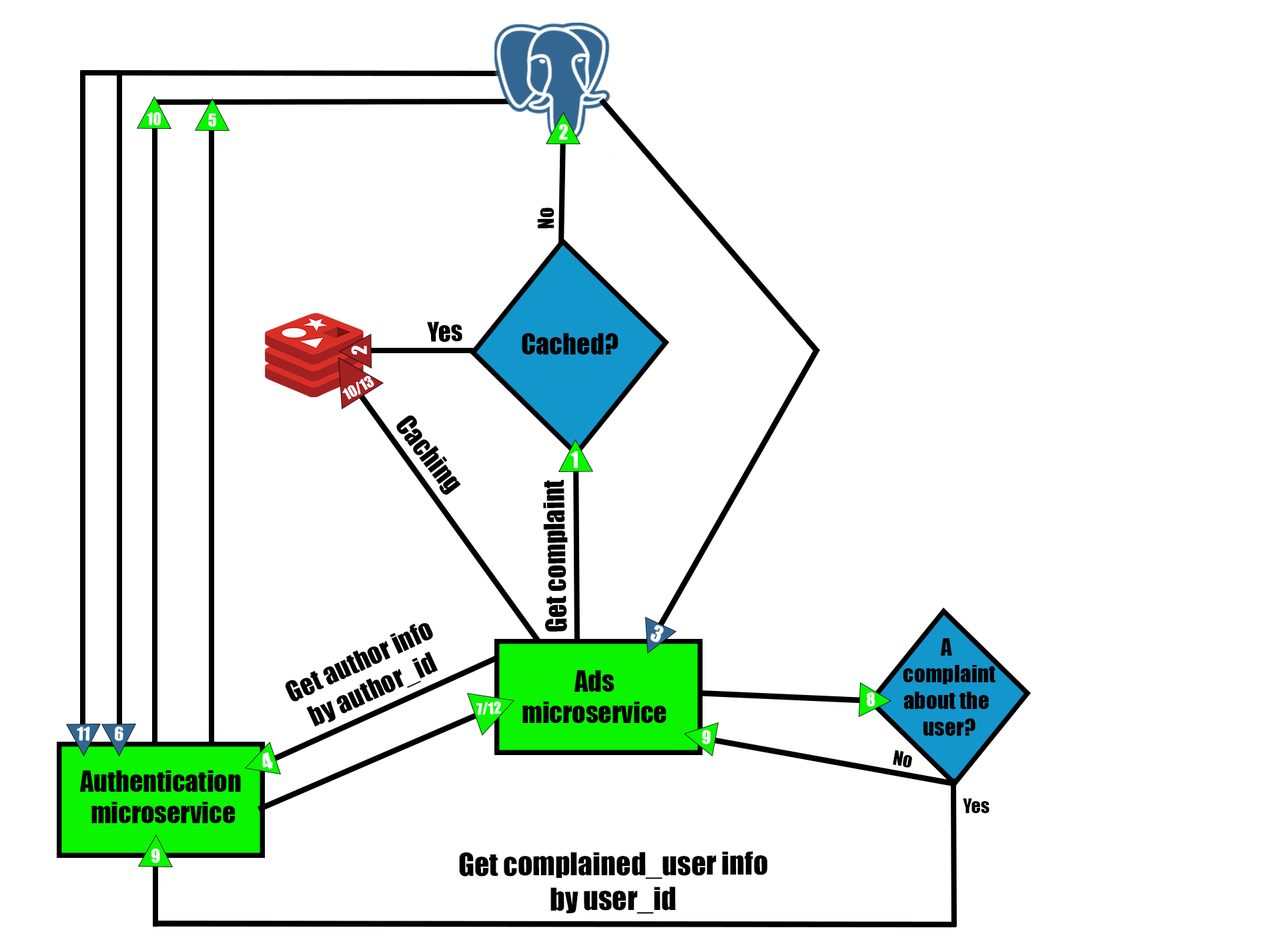
<style>
.page{position:relative;width:1261px;height:946px;background:#ffffff}
.page>*{position:absolute;margin:0}
.t1{font:15.7px "Impact";color:#ffffff}
.t2{font:16.2px "Impact";color:#ffffff}
.t3{font:19px "Impact";color:#ffffff}
.t4{font:20.5px "Impact";color:#000000}
.t5{font:25.1px "Impact";color:#000000}
.t6{font:26.8px "Impact";color:#000000}
.t7{font:14.5px "Impact";color:#ffffff}
.t8{font:26.2px "Impact";color:#010101}
.t9{font:20.5px "Impact";color:#ffffff}
.t10{font:26.7px "Impact";color:#000000}
.t11{font:22.2px "Impact";color:#010101}
.t12{font:26.5px "Impact";color:#000000}
.t13{font:14.9px "Impact";color:#ffffff}
.t14{font:17.1px "Impact";color:#ffffff}
.t15{font:17.3px "Impact";color:#ffffff}
.t16{font:18.6px "Impact";color:#000000}
.t17{font:29.1px "Impact";color:#010101}
</style>
<div class="page">
<p class="t1" style="left:147px;top:112px;width:14px;height:13px;rotate:2deg">10</p>
<p class="t2" style="left:208px;top:113px;width:8px;height:14px;rotate:2deg">5</p>
<p class="t3" style="left:559px;top:124px;width:9px;height:15px">2</p>
<p class="t4" style="left:537px;top:208px;width:18px;height:20px;rotate:-91deg">No</p>
<p class="t5" style="left:427px;top:321px;width:35px;height:21px;rotate:-2deg">Yes</p>
<p class="t6" style="left:522px;top:333px;width:97px;height:21px">Cached?</p>
<p class="t3" style="left:351px;top:346px;width:16px;height:8px;rotate:-92deg">2</p>
<p class="t7" style="left:342px;top:376px;width:32px;height:24px;rotate:-29deg">10/13</p>
<p class="t8" style="left:396px;top:415px;width:65px;height:79px;rotate:53deg">Caching</p>
<p class="t9" style="left:571px;top:451px;width:7px;height:17px">1</p>
<p class="t9" style="left:571px;top:451px;width:7px;height:17px">1</p>
<p class="t10" style="left:543px;top:479px;width:25px;height:152px;rotate:-91deg">Get complaint</p>
<p class="t8" style="left:285px;top:623px;width:153px;height:104px;text-align:center;rotate:-25deg">Get author info<br>by author_id</p>
<p class="t9" style="left:651px;top:625px;width:13px;height:17px;rotate:24deg">3</p>
<p class="t11" style="left:903px;top:638px;width:93px;height:97px;text-align:center">A complaint about the user?</p>
<p class="t12" style="left:522px;top:670px;width:145px;height:53px;text-align:center">Ads<br>microservice</p>
<p class="t13" style="left:476px;top:701px;width:25px;height:14px;rotate:-3deg">7/12</p>
<p class="t14" style="left:867px;top:692px;width:8px;height:15px;rotate:-1deg">8</p>
<p class="t15" style="left:77px;top:726px;width:13px;height:15px;rotate:1deg">11</p>
<p class="t15" style="left:115px;top:726px;width:8px;height:15px;rotate:1deg">6</p>
<p class="t14" style="left:702px;top:729px;width:9px;height:15px;rotate:1deg">9</p>
<p class="t16" style="left:893px;top:749px;width:19px;height:18px;rotate:10deg">No</p>
<p class="t9" style="left:262px;top:752px;width:12px;height:17px;rotate:-17deg">4</p>
<p class="t12" style="left:79px;top:770px;width:162px;height:53px;text-align:center">Authentication<br> microservice</p>
<p class="t16" style="left:963px;top:798px;width:27px;height:15px">Yes</p>
<p class="t14" style="left:151px;top:848px;width:9px;height:15px;rotate:-1deg">9</p>
<p class="t17" style="left:459px;top:851px;width:308px;height:62px;text-align:center">Get complained_user info<br>by user_id</p>
</div>
